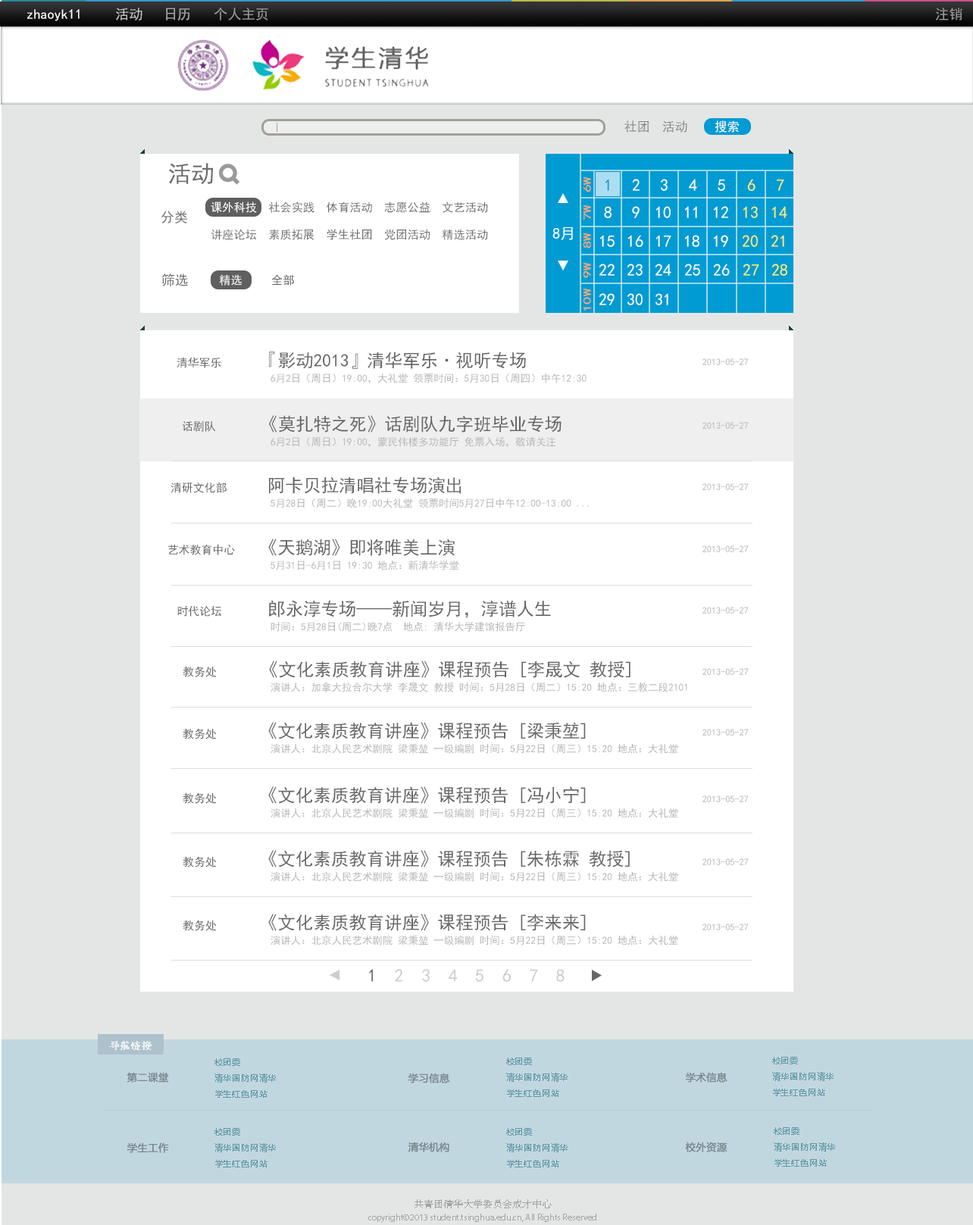
<style>
.page{position:relative;width:973px;height:1225px;background:#ffffff}
.page>*{position:absolute;margin:0}
.t1{font:13.8px "SimHei";color:#fffefe}
.t2{font:13.8px "SimHei";color:#c3c3c3}
.t3{font:13.8px "SimHei";color:#a9a9a9}
.t4{font:13.8px "SimHei";color:#9b9b9b}
.t5{font:12.7px "SimHei";color:#858585}
.t6{font:12.5px "SimHei";color:#ffffff}
.t7{font:23.4px "SimHei";color:#6e6e6e}
.t8{font:10.6px "SimHei";color:#ffaa6c;scale:1.5 1}
.t9{font:16.7px "SimHei";color:#009bd3}
.t10{font:16.7px "SimHei";color:#fefefe}
.t11{font:16.7px "SimHei";color:#ffec6c}
.t12{font:11.6px/27.3px "SimHei";color:#6e6e6e}
.t13{font:11.6px/27.3px "SimHei";color:#fefefe}
.t14{font:13.6px "SimHei";color:#6e6e6e}
.t15{font:15.2px "SimHei";color:#ffffff}
.t16{font:17.8px "SimHei";color:#676767}
.t17{font:11.3px "SimHei";color:#676767}
.t18{font:9.2px "SimHei";color:#b6b6b6}
.t19{font:10.2px "SimHei";color:#b6b6b6}
.t20{font:18px "SimHei";color:#cdcdcd}
.t21{font:18px "SimHei";color:#676767}
.t22{font:10.1px "STSong";color:#ffffff;font-weight:bold}
.t23{font:8.1px/16.2px "MicrosoftYaHei";letter-spacing:0.075em;color:#5f97a3}
.t24{font:10.1px "MicrosoftYaHei";color:#7a888e;font-weight:bold}
.t25{font:9.1px/14.1px "MyriadPro-Regular";color:#a2a3a2}
.t26{font:10.1px/14.1px "STSong";color:#a2a3a2}
</style>
<div class="page">
<p class="t1" style="left:27px;top:9px;width:53px;height:12px">zhaoyk11</p>
<p class="t2" style="left:116px;top:8px;width:26px;height:12px">活动</p>
<p class="t3" style="left:166px;top:8px;width:24px;height:12px">日历</p>
<p class="t4" style="left:214px;top:8px;width:54px;height:12px">个人主页</p>
<p class="t4" style="left:936px;top:8px;width:26px;height:12px">注销</p>
<p class="t5" style="left:624px;top:120px;width:25px;height:13px">社团</p>
<p class="t5" style="left:662px;top:120px;width:25px;height:13px">活动</p>
<p class="t6" style="left:715px;top:120px;width:24px;height:13px">搜索</p>
<p class="t7" style="left:169px;top:163px;width:45px;height:22px">活动</p>
<p class="t8" style="left:584px;top:177px;width:7px;height:15px;rotate:-90deg">6W</p>
<p class="t9" style="left:606px;top:179px;width:3px;height:12px">1</p>
<p class="t10" style="left:632px;top:179px;width:8px;height:12px">2</p>
<p class="t10" style="left:661px;top:179px;width:7px;height:12px">3</p>
<p class="t10" style="left:689px;top:179px;width:8px;height:12px">4</p>
<p class="t10" style="left:718px;top:180px;width:7px;height:11px">5</p>
<p class="t11" style="left:747px;top:179px;width:9px;height:12px">6</p>
<p class="t11" style="left:777px;top:180px;width:7px;height:11px">7</p>
<p class="t12" style="left:211px;top:202px;width:277px;height:38px"><span class="t13">课外科技 </span> 社会实践  体育活动  志愿公益  文艺活动<br>讲座论坛  素质拓展  学生社团  党团活动  精选活动</p>
<p class="t8" style="left:584px;top:205px;width:7px;height:15px;rotate:-90deg">7W</p>
<p class="t10" style="left:604px;top:206px;width:8px;height:12px">8</p>
<p class="t10" style="left:632px;top:206px;width:8px;height:12px">9</p>
<p class="t10" style="left:656px;top:206px;width:15px;height:12px">10</p>
<p class="t10" style="left:685px;top:206px;width:12px;height:12px">11</p>
<p class="t10" style="left:714px;top:206px;width:14px;height:12px">12</p>
<p class="t11" style="left:743px;top:206px;width:15px;height:12px">13</p>
<p class="t11" style="left:772px;top:206px;width:15px;height:12px">14</p>
<p class="t14" style="left:161px;top:211px;width:26px;height:13px">分类</p>
<p class="t15" style="left:552px;top:227px;width:21px;height:13px">8月</p>
<p class="t8" style="left:584px;top:233px;width:7px;height:16px;rotate:-90deg">8W</p>
<p class="t10" style="left:600px;top:235px;width:15px;height:12px">15</p>
<p class="t10" style="left:628px;top:235px;width:15px;height:12px">16</p>
<p class="t10" style="left:656px;top:235px;width:15px;height:12px">17</p>
<p class="t10" style="left:685px;top:235px;width:14px;height:12px">18</p>
<p class="t10" style="left:714px;top:235px;width:14px;height:12px">19</p>
<p class="t11" style="left:742px;top:235px;width:16px;height:12px">20</p>
<p class="t11" style="left:771px;top:235px;width:13px;height:12px">21</p>
<p class="t8" style="left:584px;top:263px;width:7px;height:15px;rotate:-90deg">9W</p>
<p class="t10" style="left:599px;top:264px;width:16px;height:12px">22</p>
<p class="t10" style="left:627px;top:264px;width:16px;height:12px">23</p>
<p class="t10" style="left:655px;top:264px;width:16px;height:12px">24</p>
<p class="t10" style="left:684px;top:264px;width:16px;height:12px">25</p>
<p class="t10" style="left:713px;top:264px;width:17px;height:12px">26</p>
<p class="t11" style="left:743px;top:264px;width:16px;height:12px">27</p>
<p class="t11" style="left:771px;top:264px;width:16px;height:12px">28</p>
<p class="t14" style="left:161px;top:274px;width:27px;height:12px">筛选</p>
<p class="t8" style="left:584px;top:289px;width:7px;height:22px;rotate:-90deg">10W</p>
<p class="t10" style="left:599px;top:293px;width:16px;height:12px">29</p>
<p class="t10" style="left:627px;top:293px;width:16px;height:12px">30</p>
<p class="t10" style="left:656px;top:293px;width:12px;height:12px">31</p>
<p class="t16" style="left:269px;top:352px;width:257px;height:17px">『影动2013』清华军乐·视听专场</p>
<p class="t17" style="left:177px;top:357px;width:44px;height:11px">清华军乐</p>
<p class="t18" style="left:703px;top:358px;width:46px;height:7px">2013-05-27</p>
<p class="t19" style="left:271px;top:373px;width:316px;height:10px">6月2日（周日）19:00，大礼堂 领票时间：5月30日（周四）中午12:30</p>
<p class="t17" style="left:182px;top:421px;width:33px;height:11px">话剧队</p>
<p class="t16" style="left:269px;top:415px;width:293px;height:18px">《莫扎特之死》话剧队九字班毕业专场</p>
<p class="t18" style="left:703px;top:422px;width:46px;height:7px">2013-05-27</p>
<p class="t19" style="left:271px;top:437px;width:284px;height:10px">6月2日（周日）19:00，蒙民伟楼多功能厅 免票入场，敬请关注</p>
<p class="t17" style="left:171px;top:482px;width:56px;height:11px">清研文化部</p>
<p class="t16" style="left:269px;top:477px;width:193px;height:17px">阿卡贝拉清唱社专场演出</p>
<p class="t18" style="left:703px;top:484px;width:46px;height:6px">2013-05-27</p>
<p class="t19" style="left:271px;top:498px;width:318px;height:11px">5月28日（周二）晚19:00大礼堂 领票时间5月27日中午12:00-13:00 ...</p>
<p class="t17" style="left:167px;top:544px;width:68px;height:11px">艺术教育中心</p>
<p class="t16" style="left:268px;top:539px;width:187px;height:17px">《天鹅湖》即将唯美上演</p>
<p class="t18" style="left:703px;top:546px;width:46px;height:6px">2013-05-27</p>
<p class="t19" style="left:271px;top:561px;width:188px;height:10px">5月31日-6月1日 19:30 地点：新清华学堂</p>
<p class="t17" style="left:177px;top:606px;width:44px;height:11px">时代论坛</p>
<p class="t16" style="left:268px;top:600px;width:283px;height:18px">郎永淳专场——新闻岁月，淳谱人生</p>
<p class="t18" style="left:703px;top:607px;width:46px;height:7px">2013-05-27</p>
<p class="t19" style="left:271px;top:621px;width:254px;height:11px">时间：5月28日(周二)晚7点  地点: 清华大学建馆报告厅</p>
<p class="t16" style="left:269px;top:661px;width:362px;height:17px">《文化素质教育讲座》课程预告 [李晟文 教授]</p>
<p class="t17" style="left:183px;top:666px;width:33px;height:12px">教务处</p>
<p class="t18" style="left:703px;top:668px;width:46px;height:7px">2013-05-27</p>
<p class="t19" style="left:271px;top:682px;width:416px;height:11px">演讲人：加拿大拉合尔大学 李晟文 教授 时间：5月28日（周二）15:20 地点：三教二段2101</p>
<p class="t16" style="left:268px;top:722px;width:318px;height:18px">《文化素质教育讲座》课程预告 [梁秉堃]</p>
<p class="t17" style="left:183px;top:728px;width:33px;height:12px">教务处</p>
<p class="t18" style="left:703px;top:729px;width:46px;height:7px">2013-05-27</p>
<p class="t19" style="left:271px;top:743px;width:407px;height:11px">演讲人：北京人民艺术剧院 梁秉堃 一级编剧 时间：5月22日（周三）15:20 地点：大礼堂</p>
<p class="t17" style="left:183px;top:793px;width:33px;height:11px">教务处</p>
<p class="t16" style="left:268px;top:787px;width:318px;height:17px">《文化素质教育讲座》课程预告 [冯小宁]</p>
<p class="t18" style="left:703px;top:796px;width:46px;height:7px">2013-05-27</p>
<p class="t19" style="left:271px;top:808px;width:407px;height:10px">演讲人：北京人民艺术剧院 梁秉堃 一级编剧 时间：5月22日（周三）15:20 地点：大礼堂</p>
<p class="t17" style="left:183px;top:856px;width:33px;height:12px">教务处</p>
<p class="t16" style="left:268px;top:850px;width:362px;height:18px">《文化素质教育讲座》课程预告 [朱栋霖 教授]</p>
<p class="t18" style="left:703px;top:859px;width:46px;height:6px">2013-05-27</p>
<p class="t19" style="left:271px;top:872px;width:407px;height:10px">演讲人：北京人民艺术剧院 梁秉堃 一级编剧 时间：5月22日（周三）15:20 地点：大礼堂</p>
<p class="t16" style="left:268px;top:914px;width:318px;height:17px">《文化素质教育讲座》课程预告 [李来来]</p>
<p class="t17" style="left:183px;top:920px;width:33px;height:11px">教务处</p>
<p class="t18" style="left:703px;top:924px;width:46px;height:7px">2013-05-27</p>
<p class="t19" style="left:271px;top:935px;width:407px;height:11px">演讲人：北京人民艺术剧院 梁秉堃 一级编剧 时间：5月22日（周三）15:20 地点：大礼堂</p>
<p class="t20" style="left:369px;top:969px;width:196px;height:13px"><span class="t21">1  </span>2  3  4  5  6  7  8</p>
<p class="t22" style="left:109px;top:1041px;width:43px;height:9px;opacity:0.7">导航链接</p>
<p class="t23" style="left:214px;top:1059px;width:62px;height:39px">校团委<br>清华国防网清华<br>学生红色网站</p>
<p class="t23" style="left:506px;top:1058px;width:62px;height:39px">校团委<br>清华国防网清华<br>学生红色网站</p>
<p class="t23" style="left:772px;top:1057px;width:62px;height:40px">校团委<br>清华国防网清华<br>学生红色网站</p>
<p class="t24" style="left:127px;top:1072px;width:42px;height:11px">第二课堂</p>
<p class="t24" style="left:408px;top:1073px;width:42px;height:11px">学习信息</p>
<p class="t24" style="left:685px;top:1072px;width:43px;height:11px">学术信息</p>
<p class="t23" style="left:214px;top:1128px;width:62px;height:40px">校团委<br>清华国防网清华<br>学生红色网站</p>
<p class="t23" style="left:506px;top:1128px;width:62px;height:40px">校团委<br>清华国防网清华<br>学生红色网站</p>
<p class="t23" style="left:774px;top:1128px;width:61px;height:39px">校团委<br>清华国防网清华<br>学生红色网站</p>
<p class="t24" style="left:127px;top:1143px;width:42px;height:10px">学生工作</p>
<p class="t24" style="left:408px;top:1142px;width:41px;height:11px">清华机构</p>
<p class="t24" style="left:685px;top:1142px;width:43px;height:11px">校外资源</p>
<p class="t25" style="left:368px;top:1200px;width:228px;height:23px;text-align:center"><span class="t26">共青团清华大学委员会成才中心<br></span>copyright©2013 student.tsinghua.edu.cn, All Rights Reserved</p>
</div>
